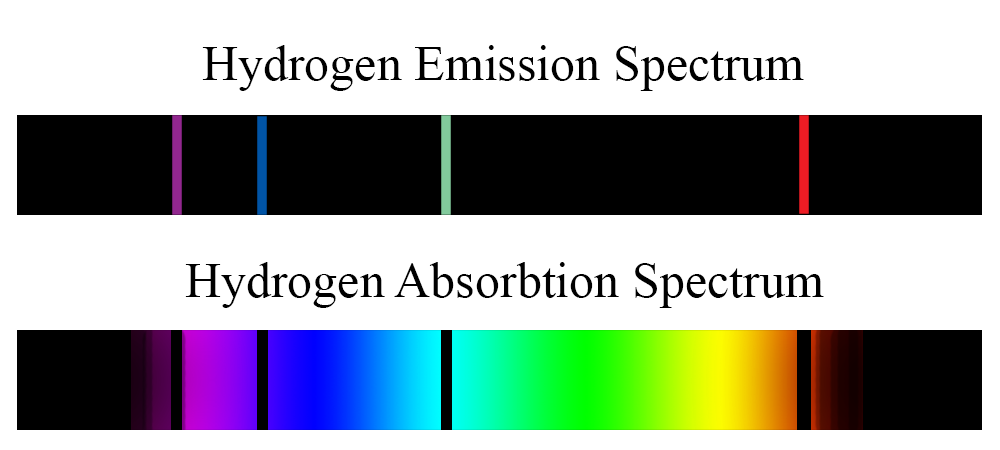
<style>
.page{position:relative;width:1000px;height:450px;background:#ffffff}
.page>*{position:absolute;margin:0}
.t1{font:50px "TimesNewRomanPSMT";color:#000000}
.t2{font:12px "TimesNewRomanPSMT";color:#000000}
</style>
<div class="page">
<p class="t1" style="left:202px;top:45px;width:602px;height:46px">Hydrogen Emission Spectrum</p>
<p class="t2" style="left:185px;top:262px;width:639px;height:46px;text-align:center">Hydrogen Absorbtion Spectrum</p>
</div>
